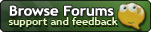
<style>
.page{position:relative;width:151px;height:32px}
.page>*{position:absolute;margin:0}
.t1{font:13.7px "TrebuchetMS-Bold";letter-spacing:-0.005em;color:#fefeff;scale:1.11 1}
.t2{font:9.9px "TrebuchetMS-Bold";letter-spacing:-0.005em;color:#eaf3d3;scale:1.11 1}
</style>
<div class="page">
<p class="t1" style="left:9px;top:5px;width:105px;height:11px">Browse Forums</p>
<p class="t2" style="left:8px;top:17px;width:110px;height:10px">support and feedback</p>
</div>
